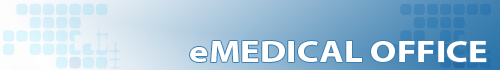
<style>
.page{position:relative;width:500px;height:70px}
.page>*{position:absolute;margin:0}
.t1{font:31px "MyriadPro-Bold";color:#ffffff;scale:1.2 1}
</style>
<div class="page">
<p class="t1" style="left:190px;top:41px;width:297px;height:21px">eMEDICAL OFFICE</p>
</div>
